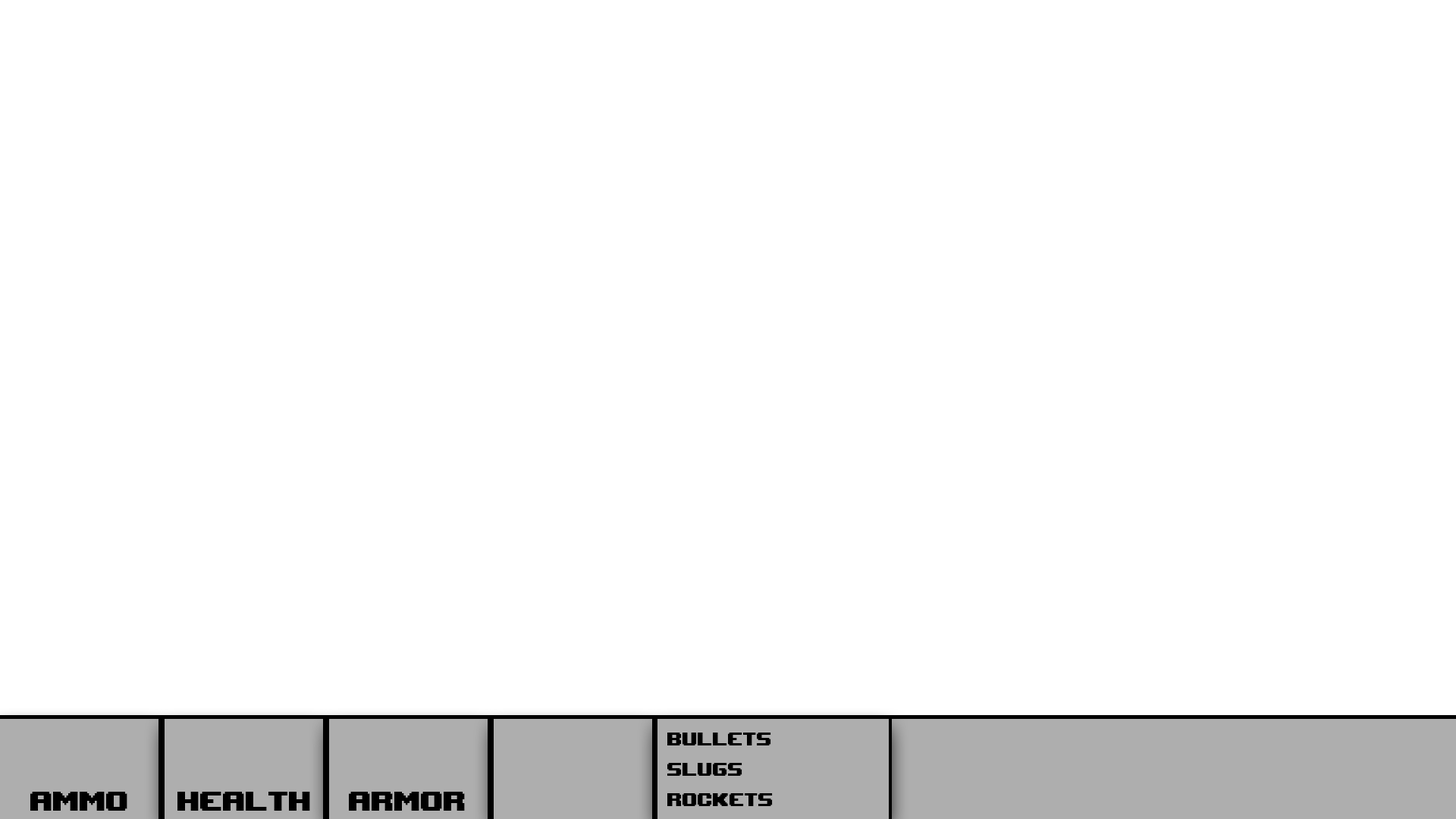
<style>
.page{position:relative;width:1456px;height:819px;background:#ffffff}
.page>*{position:absolute;margin:0}
.t1{font:25.3px "UpheavalTT-BRK-";color:#000000}
.t2{font:37.9px "UpheavalTT-BRK-";color:#000000}
</style>
<div class="page">
<p class="t1" style="left:667px;top:733px;width:106px;height:73px">BULLETS<br>SLUGS<br>ROCKETS</p>
<p class="t2" style="left:30px;top:792px;width:97px;height:19px">AMMO</p>
<p class="t2" style="left:177px;top:792px;width:133px;height:19px">HEALTH</p>
<p class="t2" style="left:349px;top:792px;width:116px;height:19px">ARMOR</p>
</div>
